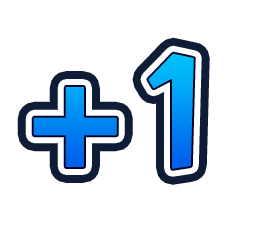
<style>
.page{position:relative;width:256px;height:238px;background:#ffffff}
.page>*{position:absolute;margin:0}
.t1{font:141.7px "RocknRollOne-Regular";font-weight:bold}
</style>
<div class="page">
<p class="t1" style="left:33px;top:53px;width:161px;height:116px">+1</p>
</div>
